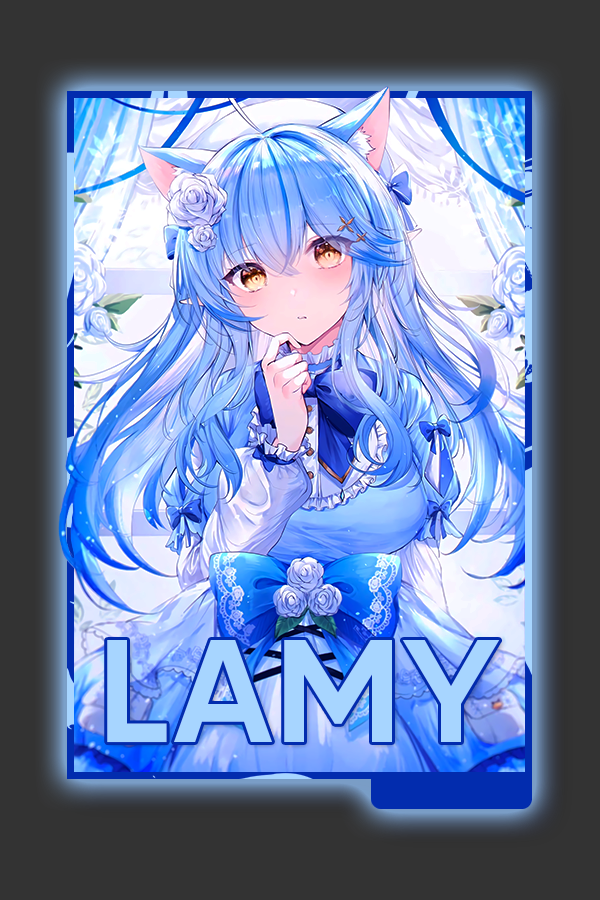
<style>
.page{position:relative;width:600px;height:900px;background:#333333}
.page>*{position:absolute;margin:0}
.t1{font:146.4px "MADETOMMY-Medium";color:#a7d5ff}
</style>
<div class="page">
<p class="t1" style="left:107px;top:640px;width:393px;height:103px">LAMY</p>
</div>
